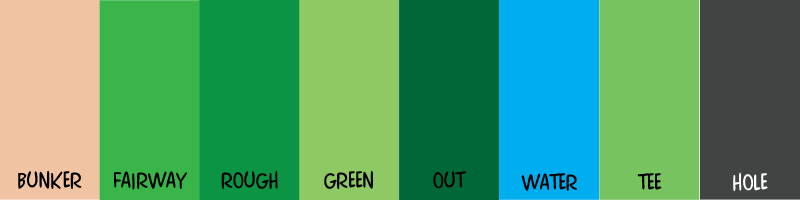
<style>
.page{position:relative;width:800px;height:200px}
.page>*{position:absolute;margin:0}
.t1{font:20px "ComicsCarToon";color:#000000}
.t2{font:20px "ComicsCarToon";color:#ffffff}
</style>
<div class="page">
<p class="t1" style="left:18px;top:170px;width:64px;height:19px">bunker</p>
<p class="t1" style="left:114px;top:171px;width:73px;height:19px">fairway</p>
<p class="t1" style="left:221px;top:170px;width:57px;height:19px">rough</p>
<p class="t1" style="left:324px;top:170px;width:49px;height:19px">green</p>
<p class="t1" style="left:433px;top:171px;width:33px;height:18px">out</p>
<p class="t1" style="left:521px;top:173px;width:56px;height:18px">water</p>
<p class="t1" style="left:637px;top:173px;width:25px;height:17px">tee</p>
<p class="t2" style="left:733px;top:172px;width:35px;height:19px">hole</p>
</div>
